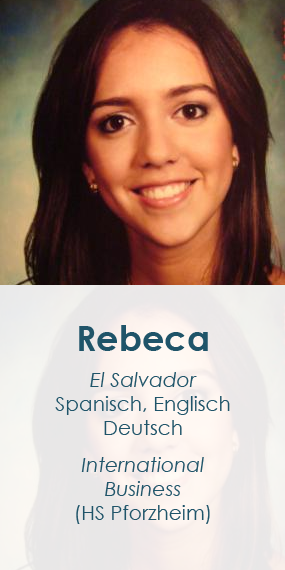
<style>
.page{position:relative;width:285px;height:570px}
.page>*{position:absolute;margin:0}
.t1{font:20.1px "CenturyGothic";color:#1f5469}
.t2{font:35.2px "CenturyGothic-Bold";color:#1f5469}
.t3{font:20.1px "CenturyGothic-Italic";color:#1f5469}
</style>
<div class="page">
<p class="t1" style="left:55px;top:325px;width:175px;height:199px;text-align:center"><span class="t2">Rebeca<br><br></span><span class="t3">El Salvador<br></span>Spanisch, Englisch Deutsch<br> <br><span class="t3">International<br>Business<br></span>(HS Pforzheim)</p>
</div>
